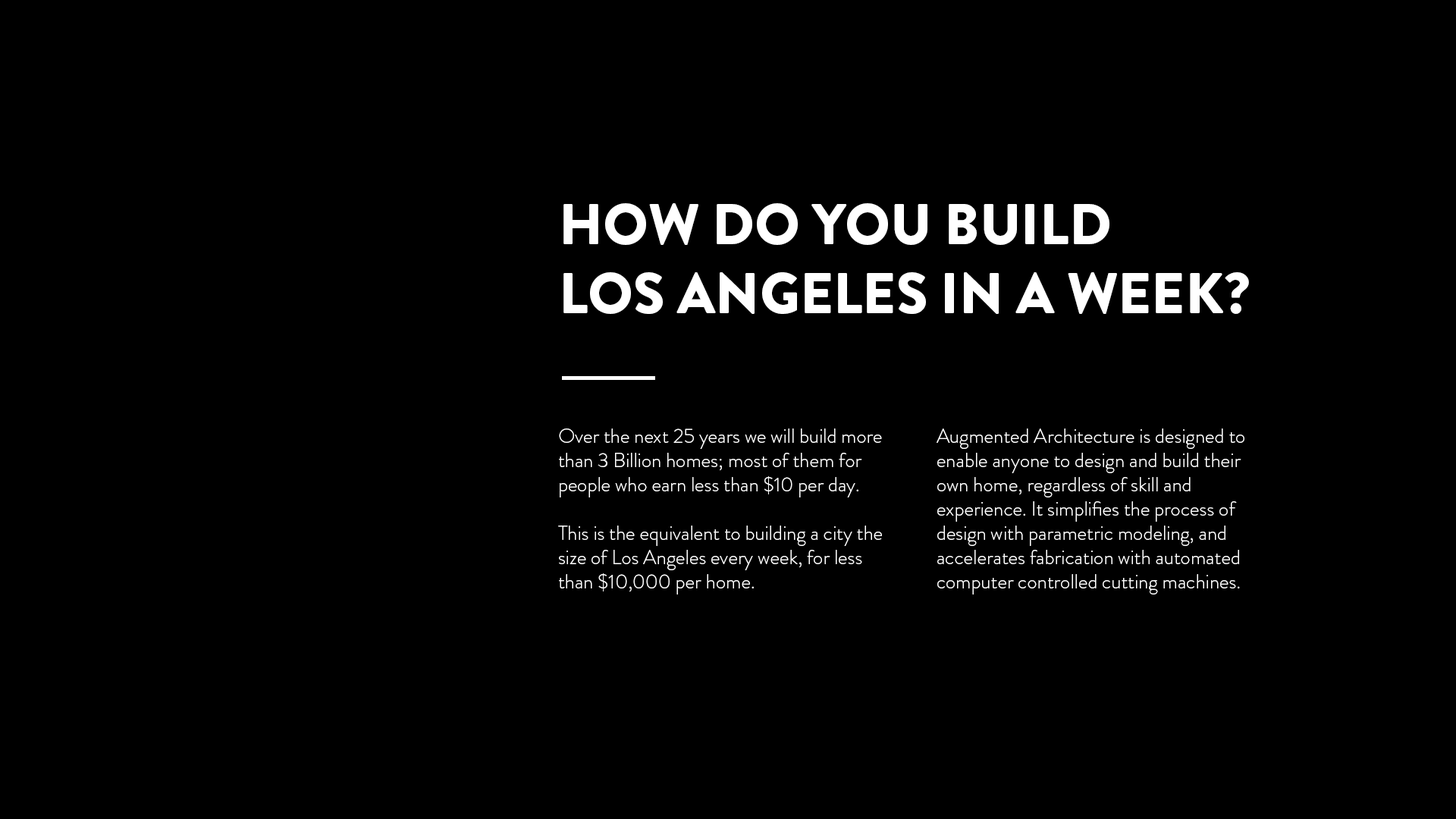
<style>
.page{position:relative;width:1456px;height:819px;background:#000000}
.page>*{position:absolute;margin:0}
.t1{font:57.3px "BrandonGrotesque-Black";color:#ffffff}
.t2{font:20.2px "BrandonGrotesque-Light";color:#ffffff}
</style>
<div class="page">
<p class="t1" style="left:563px;top:203px;width:686px;height:111px">HOW DO YOU BUILD<br>LOS ANGELES IN A WEEK?</p>
<p class="t2" style="left:558px;top:428px;width:324px;height:167px">Over the next 25 years we will build more than 3 Billion homes; most of them for people who earn less than $10 per day. <br><br>This is the equivalent to building a city the size of Los Angeles every week, for less than $10,000 per home.</p>
<p class="t2" style="left:937px;top:428px;width:307px;height:167px">Augmented Architecture is designed to enable anyone to design and build their own home, regardless of skill and <br>experience. It simplifies the process of design with parametric modeling, and accelerates fabrication with automated computer controlled cutting machines.</p>
</div>
